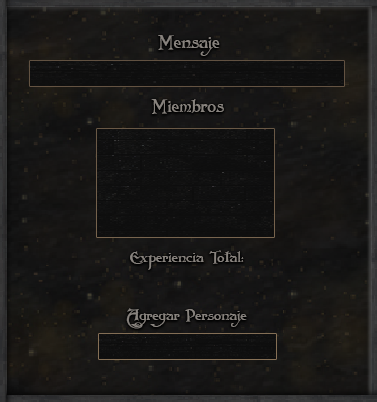
<style>
.page{position:relative;width:377px;height:402px}
.page>*{position:absolute;margin:0}
.t1{font:17.7px "Folkard";color:#88837e}
.t2{font:14.8px "Folkard";color:#88837e}
</style>
<div class="page">
<p class="t1" style="left:158px;top:35px;width:62px;height:21px">Mensaje</p>
<p class="t1" style="left:151px;top:99px;width:73px;height:15px">Miembros</p>
<p class="t2" style="left:130px;top:250px;width:114px;height:20px">Experiencia Total:</p>
<p class="t2" style="left:126px;top:308px;width:121px;height:21px">Agregar Personaje</p>
</div>
